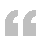
<style>
.page{position:relative;width:40px;height:40px;background:#ffffff}
.page>*{position:absolute;margin:0}
.t1{font:80px "HelveticaNeue-Bold";color:#bfbfbf;font-weight:bold}
</style>
<div class="page">
<p class="t1" style="left:5px;top:10px;width:31px;height:26px">“</p>
</div>
